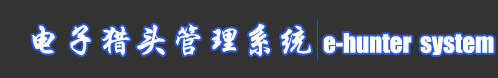
<style>
.page{position:relative;width:498px;height:78px;background:#333333}
.page>*{position:absolute;margin:0}
.t1{font:36px "STXingkai";color:#ffffff}
.t2{font:24.9px "Impact";color:#ffffff}
</style>
<div class="page">
<p class="t1" style="left:32px;top:24px;width:279px;height:33px">电子猎头管理系统</p>
<p class="t2" style="left:323px;top:33px;width:171px;height:22px">e-hunter  system</p>
</div>
